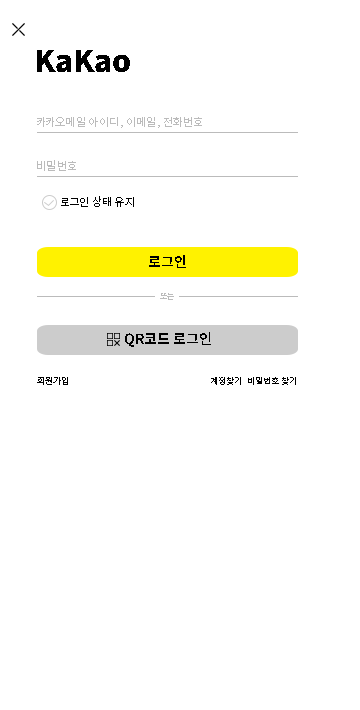
<style>
.page{position:relative;width:360px;height:710px;background:#ffffff}
.page>*{position:absolute;margin:0}
.t1{font:30px "NotoSansKR-Black";color:#000000}
.t2{font:11px "NotoSansKR-Regular";color:#bbbbbb}
.t3{font:10.8px "NotoSansKR-Regular";color:#bbbbbb}
.t4{font:11px "NotoSansKR-Regular";color:#000000}
.t5{font:14px "NotoSansKR-SemiBold";color:#000000}
.t6{font:8px "NotoSansKR-SemiBold";color:#bbbbbb}
.t7{font:9px "NotoSansKR-Thin";color:#000000}
.t8{font:8.6px "NotoSansKR-Thin";color:#000000;scale:1.04 1}
</style>
<div class="page">
<p class="t1" style="left:37px;top:50px;width:93px;height:22px">KaKao</p>
<p class="t2" style="left:37px;top:117px;width:165px;height:11px">카카오메일 아이디, 이메일, 전화번호</p>
<p class="t3" style="left:37px;top:160px;width:39px;height:11px">비밀번호</p>
<p class="t4" style="left:61px;top:196px;width:73px;height:11px">로그인 상태 유지</p>
<p class="t5" style="left:149px;top:255px;width:37px;height:13px">로그인</p>
<p class="t6" style="left:160px;top:293px;width:14px;height:7px">또는</p>
<p class="t5" style="left:125px;top:332px;width:86px;height:15px">QR코드 로그인</p>
<p class="t7" style="left:37px;top:377px;width:31px;height:8px">회원가입</p>
<p class="t8" style="left:211px;top:377px;width:30px;height:8px">계정찾기</p>
<p class="t8" style="left:248px;top:377px;width:48px;height:8px">비밀번호 찾기</p>
</div>
